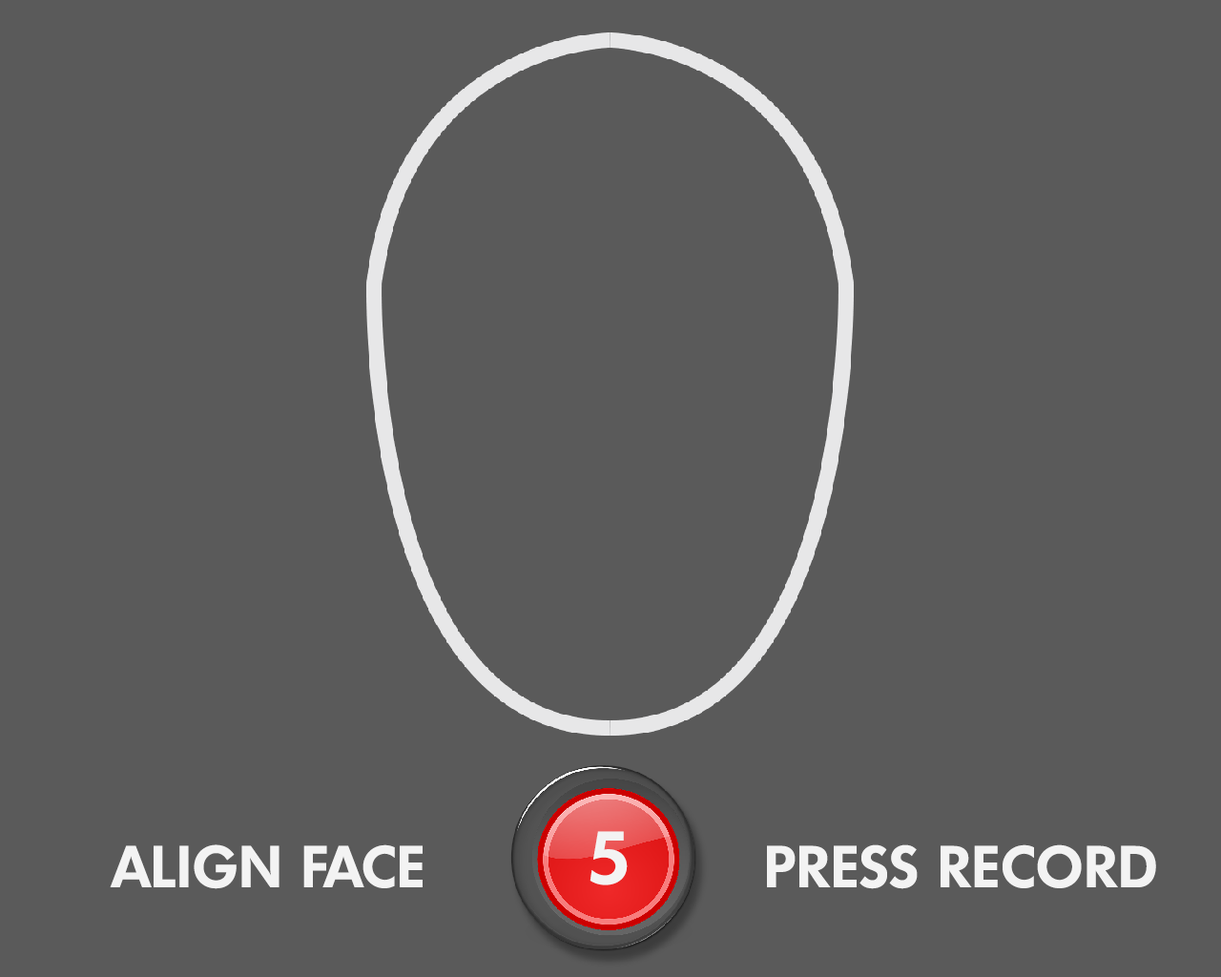
<style>
.page{position:relative;width:1221px;height:977px;background:#5a5a5a}
.page>*{position:absolute;margin:0}
.t1{font:72.1px "FuturaTS-DemiBold";color:#f3f3f3}
.t2{font:57.2px "FuturaTS-DemiBold";letter-spacing:0.025em;color:#f3f3f3}
</style>
<div class="page">
<p class="t1" style="left:589px;top:831px;width:39px;height:54px">5</p>
<p class="t2" style="left:110px;top:844px;width:313px;height:45px">ALIGN FACE</p>
<p class="t2" style="left:767px;top:844px;width:389px;height:45px">PRESS RECORD</p>
</div>
